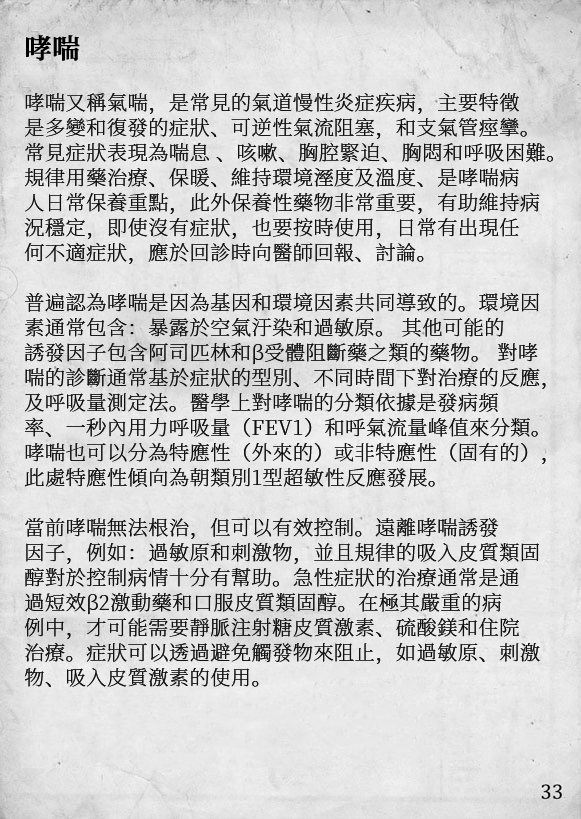
<style>
.page{position:relative;width:581px;height:819px}
.page>*{position:absolute;margin:0}
.t1{font:20.2px/25px "SourceHanSerifCN-ExtraLight";letter-spacing:0.02em;color:#111111}
.t2{font:27.2px/29px "SourceHanSerifCN-SemiBold";letter-spacing:0.02em;color:#000000;font-weight:bold}
</style>
<div class="page">
<p class="t1" style="left:24px;top:35px;width:529px;height:652px"><span class="t2">哮喘<br><br></span>哮喘又稱氣喘，是常見的氣道慢性炎症疾病，主要特徵<br>是多變和復發的症狀、可逆性氣流阻塞，和支氣管痙攣。<br>常見症狀表現為喘息 、咳嗽、胸腔緊迫、胸悶和呼吸困難。<br>規律用藥治療、保暖、維持環境溼度及溫度、是哮喘病<br>人日常保養重點，此外保養性藥物非常重要，有助維持病<br>況穩定，即使沒有症狀，也要按時使用，日常有出現任<br>何不適症狀，應於回診時向醫師回報、討論。<br><br>普遍認為哮喘是因為基因和環境因素共同導致的。環境因<br>素通常包含：暴露於空氣汙染和過敏原。 其他可能的<br>誘發因子包含阿司匹林和β受體阻斷藥之類的藥物。 對哮<br>喘的診斷通常基於症狀的型別、不同時間下對治療的反應，<br>及呼吸量測定法。醫學上對哮喘的分類依據是發病頻<br>率、一秒內用力呼吸量（FEV1）和呼氣流量峰值來分類。<br>哮喘也可以分為特應性（外來的）或非特應性（固有的），<br>此處特應性傾向為朝類別1型超敏性反應發展。<br><br>當前哮喘無法根治，但可以有效控制。遠離哮喘誘發<br>因子，例如：過敏原和刺激物，並且規律的吸入皮質類固<br>醇對於控制病情十分有幫助。急性症狀的治療通常是通<br>過短效β2激動藥和口服皮質類固醇。在極其嚴重的病<br>例中，才可能需要靜脈注射糖皮質激素、硫酸鎂和住院<br>治療。症狀可以透過避免觸發物來阻止，如過敏原、刺激<br>物、吸入皮質激素的使用。</p>
</div>
